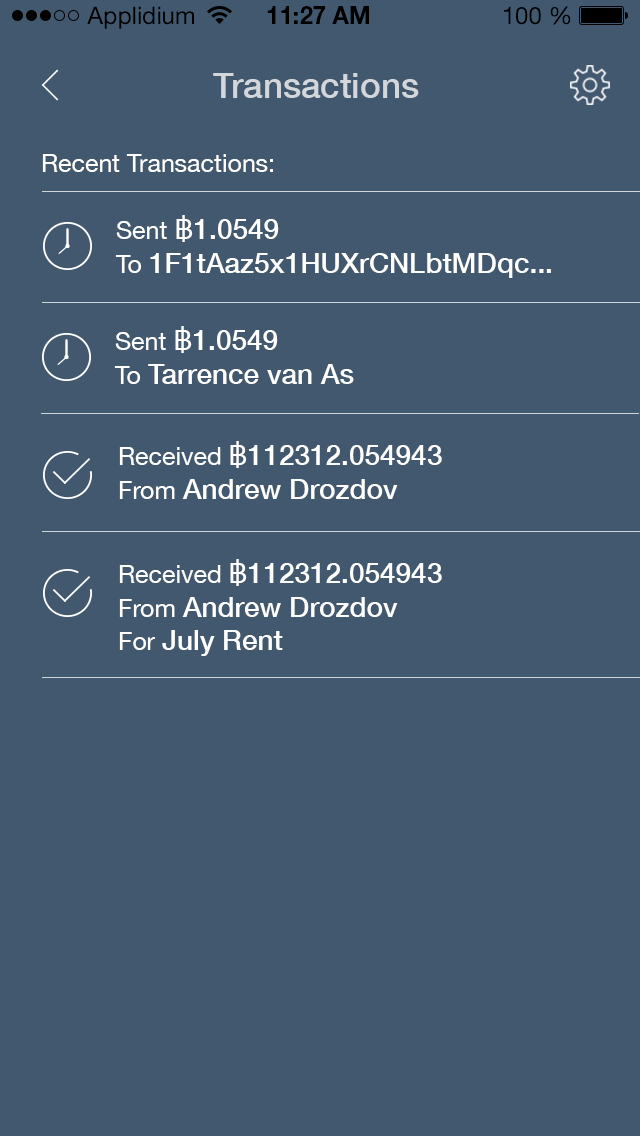
<style>
.page{position:relative;width:640px;height:1136px;background:#42586e}
.page>*{position:absolute;margin:0}
.t1{font:24px "HelveticaNeueLTStd-Roman";color:#000000}
.t2{font:24px "HelveticaNeueLTStd-Bd";color:#000000}
.t3{font:35px "HelveticaNeue-Medium";color:#d3d6da}
.t4{font:25px "HelveticaNeue";color:#ffffff}
.t5{font:28px "HelveticaNeue-Medium";color:#ffffff}
.t6{font:28px "HelveticaNeue";color:#ffffff}
</style>
<div class="page">
<p class="t1" style="left:87px;top:6px;width:107px;height:23px">Applidium</p>
<p class="t2" style="left:267px;top:6px;width:102px;height:18px">11:27 AM</p>
<p class="t1" style="left:504px;top:6px;width:67px;height:19px">100 %</p>
<p class="t3" style="left:213px;top:73px;width:206px;height:25px">Transactions</p>
<p class="t4" style="left:42px;top:154px;width:231px;height:18px">Recent Transactions:</p>
<p class="t5" style="left:115px;top:215px;width:436px;height:63px"><span class="t4">Sent </span><span class="t6">฿</span>1.0549<span class="t4"><br>To </span>1F1tAaz5x1HUXrCNLbtMDqc...</p>
<p class="t5" style="left:114px;top:326px;width:240px;height:58px"><span class="t4">Sent </span><span class="t6">฿</span>1.0549<span class="t4"><br>To </span>Tarrence van As</p>
<p class="t5" style="left:119px;top:441px;width:323px;height:58px"><span class="t4">Received </span><span class="t6">฿</span>112312.054943<span class="t4"><br>From </span>Andrew Drozdov</p>
<p class="t5" style="left:119px;top:559px;width:323px;height:97px"><span class="t4">Received </span><span class="t6">฿</span>112312.054943<span class="t4"><br>From </span>Andrew Drozdov<br><span class="t4">For </span>July Rent</p>
</div>
